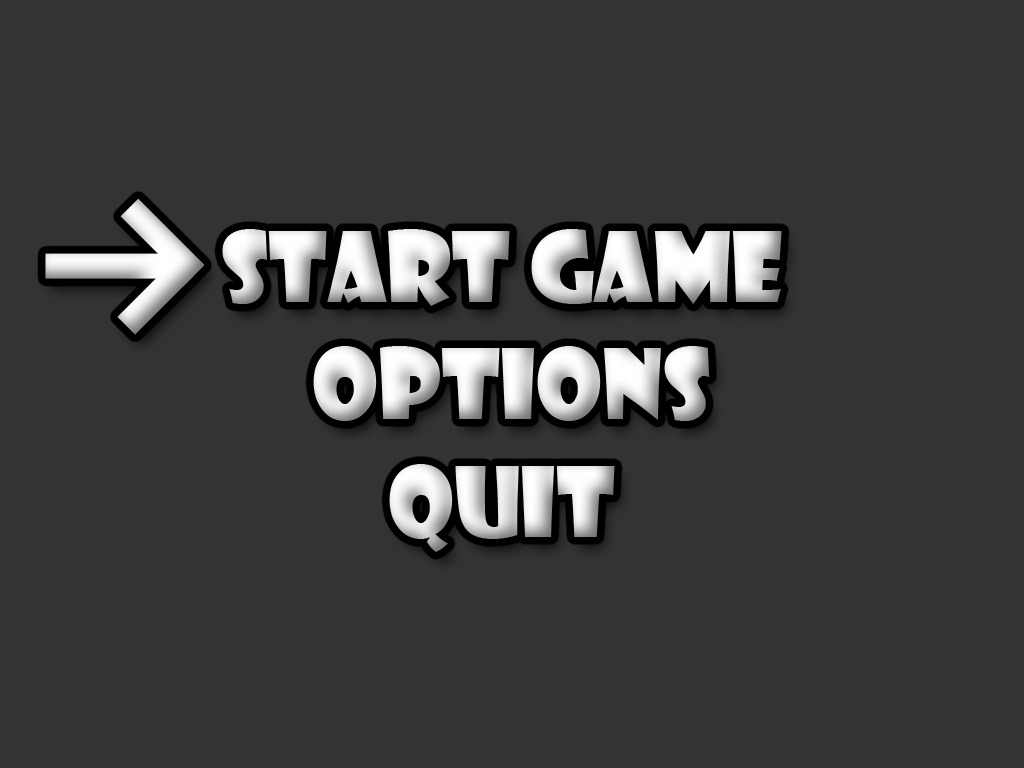
<style>
.page{position:relative;width:1024px;height:768px;background:#333333}
.page>*{position:absolute;margin:0}
.t1{font:95px "ShowcardGothic-Reg"}
</style>
<div class="page">
<p class="t1" style="left:222px;top:229px;width:560px;height:77px">Start Game</p>
<p class="t1" style="left:313px;top:346px;width:397px;height:75px">Options</p>
<p class="t1" style="left:389px;top:464px;width:226px;height:88px">Quit</p>
</div>
